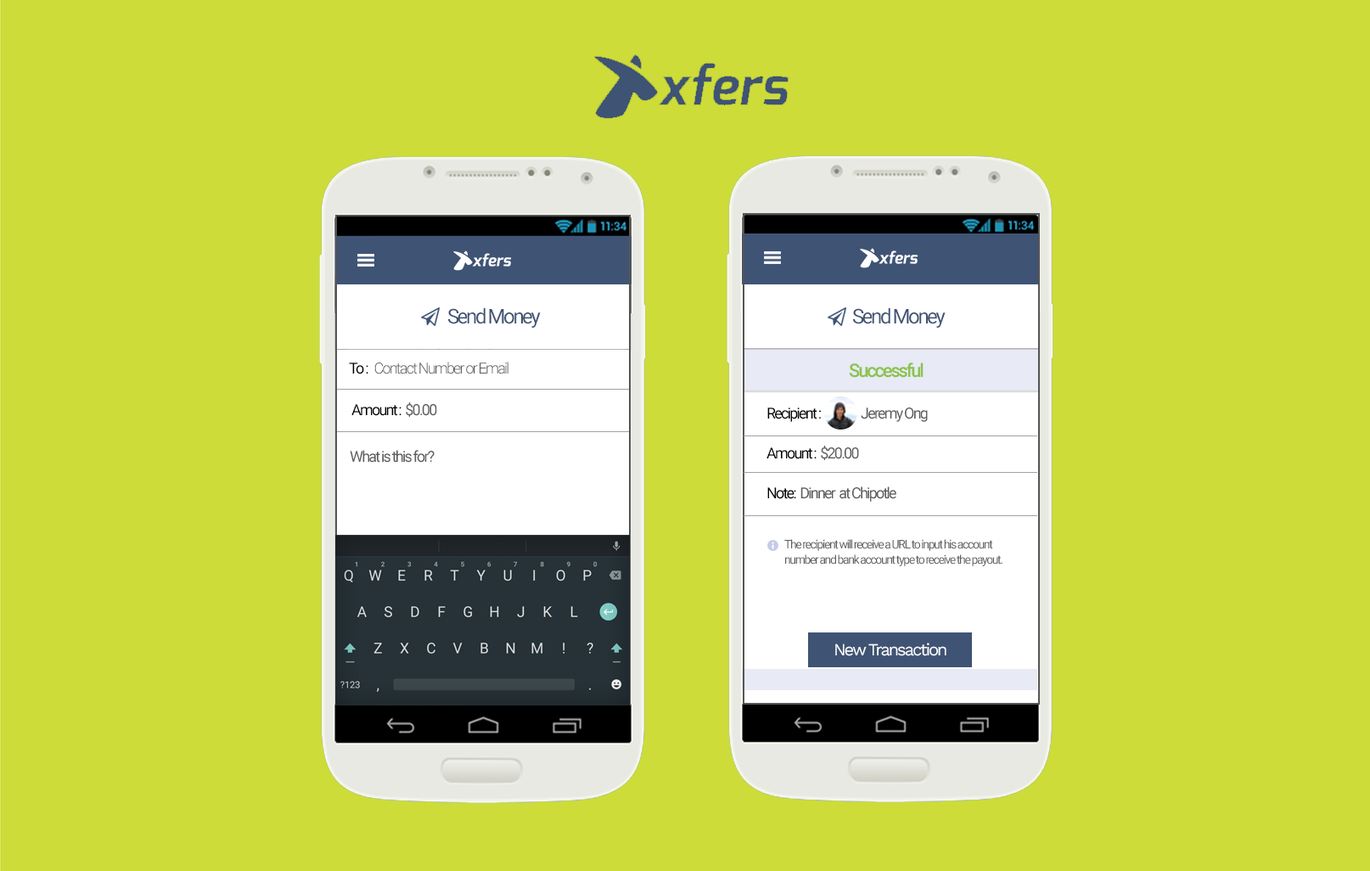
<style>
.page{position:relative;width:1370px;height:871px;background:#cddc39}
.page>*{position:absolute;margin:0}
.t1{font:20.4px "Roboto-Regular";letter-spacing:-0.1em;color:#3f5374}
.t2{font:15.3px "Roboto-Light";letter-spacing:-0.1em;color:#5d5d5d}
.t3{font:15.3px "Roboto-Regular";letter-spacing:-0.1em;color:#000000}
.t4{font:18.7px "Roboto-Medium";letter-spacing:-0.1em;color:#8bc34a}
.t5{font:15.3px "Roboto-Regular";letter-spacing:-0.1em;color:#5d5d5d}
.t6{font:11.9px/15.3px "Roboto-Regular";letter-spacing:-0.1em;color:#5d5d5d}
.t7{font:17px "WorkSans-Regular";letter-spacing:-0.1em;color:#ffffff}
</style>
<div class="page">
<p class="t1" style="left:448px;top:308px;width:93px;height:20px">Send Money</p>
<p class="t1" style="left:853px;top:308px;width:92px;height:20px">Send Money</p>
<p class="t2" style="left:349px;top:361px;width:159px;height:13px"><span class="t3">To :   </span>Contact Number or Email</p>
<p class="t4" style="left:849px;top:362px;width:74px;height:16px">Successful</p>
<p class="t3" style="left:351px;top:402px;width:86px;height:15px">Amount :  <span class="t5">$0.00</span></p>
<p class="t3" style="left:767px;top:407px;width:160px;height:15px">Recipient :                  <span class="t5">Jeremy Ong</span></p>
<p class="t5" style="left:350px;top:450px;width:84px;height:12px">What is this for?</p>
<p class="t3" style="left:766px;top:446px;width:93px;height:14px">Amount :  <span class="t5">$20.00</span></p>
<p class="t5" style="left:767px;top:486px;width:129px;height:16px"><span class="t3">Note:  </span>Dinner  at Chipotle</p>
<p class="t6" style="left:784px;top:539px;width:218px;height:27px">The recipient will receive a URL to input his account number and bank account type to receive the payout.</p>
<p class="t7" style="left:835px;top:642px;width:111px;height:14px">New Transaction</p>
</div>
